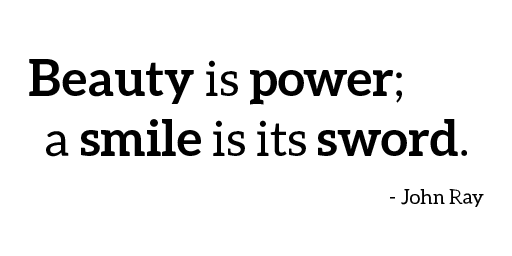
<style>
.page{position:relative;width:512px;height:256px;background:#ffffff}
.page>*{position:absolute;margin:0}
.t1{font:20px "Aleo-Regular";color:#000000}
.t2{font:50px "Aleo-Bold";color:#000000}
.t3{font:48px "Aleo-Regular";color:#000000}
</style>
<div class="page">
<p class="t1" style="left:29px;top:59px;width:455px;height:148px;text-align:center"><span class="t2">Beauty</span><span class="t3"> is </span><span class="t2">power</span><span class="t3">; <br>  a </span><span class="t2">smile</span><span class="t3"> is its </span><span class="t2">sword</span><span class="t3">.<br></span> <br>            - John Ray</p>
</div>
